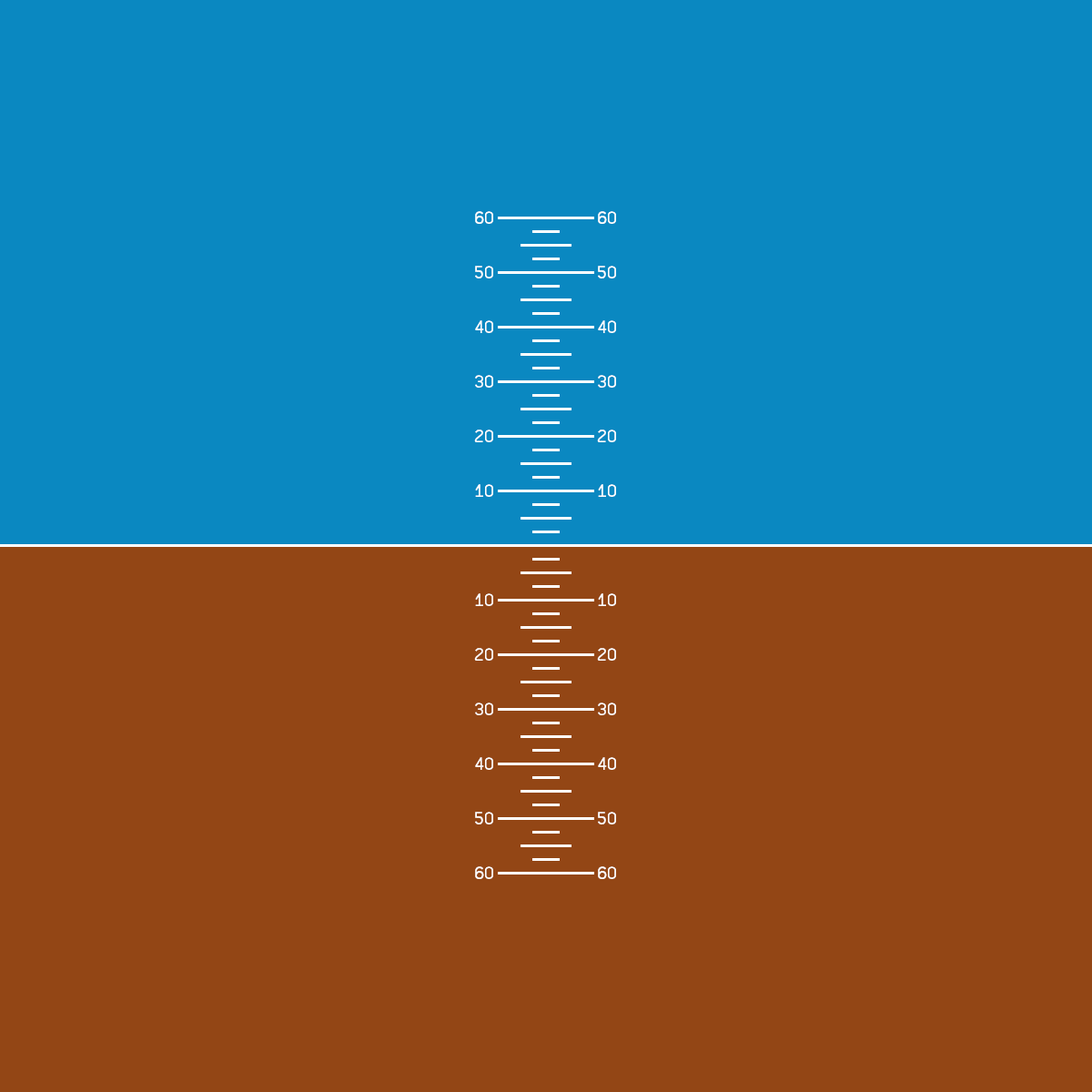
<style>
.page{position:relative;width:1092px;height:1092px;background:#934615}
.page>*{position:absolute;margin:0}
.t1{font:16.4px "AirbusPFD";color:#ffffff}
</style>
<div class="page">
<p class="t1" style="left:475px;top:211px;width:18px;height:13px">60</p>
<p class="t1" style="left:598px;top:211px;width:18px;height:13px">60</p>
<p class="t1" style="left:475px;top:266px;width:18px;height:12px">50</p>
<p class="t1" style="left:598px;top:266px;width:18px;height:12px">50</p>
<p class="t1" style="left:475px;top:320px;width:18px;height:13px">40</p>
<p class="t1" style="left:598px;top:320px;width:18px;height:13px">40</p>
<p class="t1" style="left:475px;top:375px;width:18px;height:13px">30</p>
<p class="t1" style="left:598px;top:375px;width:18px;height:13px">30</p>
<p class="t1" style="left:474px;top:430px;width:19px;height:12px">20</p>
<p class="t1" style="left:597px;top:430px;width:19px;height:12px">20</p>
<p class="t1" style="left:475px;top:484px;width:18px;height:13px">10</p>
<p class="t1" style="left:598px;top:484px;width:18px;height:13px">10</p>
<p class="t1" style="left:475px;top:593px;width:18px;height:13px">10</p>
<p class="t1" style="left:598px;top:593px;width:18px;height:13px">10</p>
<p class="t1" style="left:474px;top:648px;width:19px;height:13px">20</p>
<p class="t1" style="left:597px;top:648px;width:19px;height:13px">20</p>
<p class="t1" style="left:475px;top:703px;width:18px;height:12px">30</p>
<p class="t1" style="left:598px;top:703px;width:18px;height:12px">30</p>
<p class="t1" style="left:475px;top:757px;width:18px;height:13px">40</p>
<p class="t1" style="left:598px;top:757px;width:18px;height:13px">40</p>
<p class="t1" style="left:475px;top:812px;width:18px;height:12px">50</p>
<p class="t1" style="left:598px;top:812px;width:18px;height:12px">50</p>
<p class="t1" style="left:475px;top:866px;width:18px;height:13px">60</p>
<p class="t1" style="left:598px;top:866px;width:18px;height:13px">60</p>
</div>
